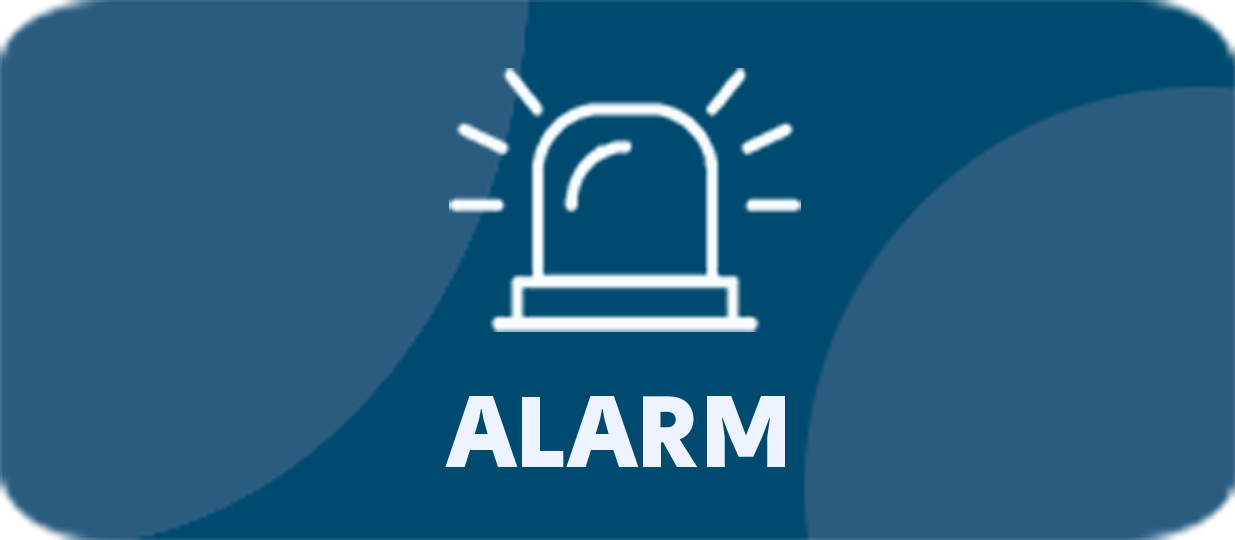
<style>
.page{position:relative;width:1235px;height:540px;background:#2a5c80}
.page>*{position:absolute;margin:0}
.t1{font:100.7px "Solomon-Sans-Black";color:#eef4ff}
</style>
<div class="page">
<p class="t1" style="left:445px;top:396px;width:340px;height:71px">ALARM</p>
</div>
